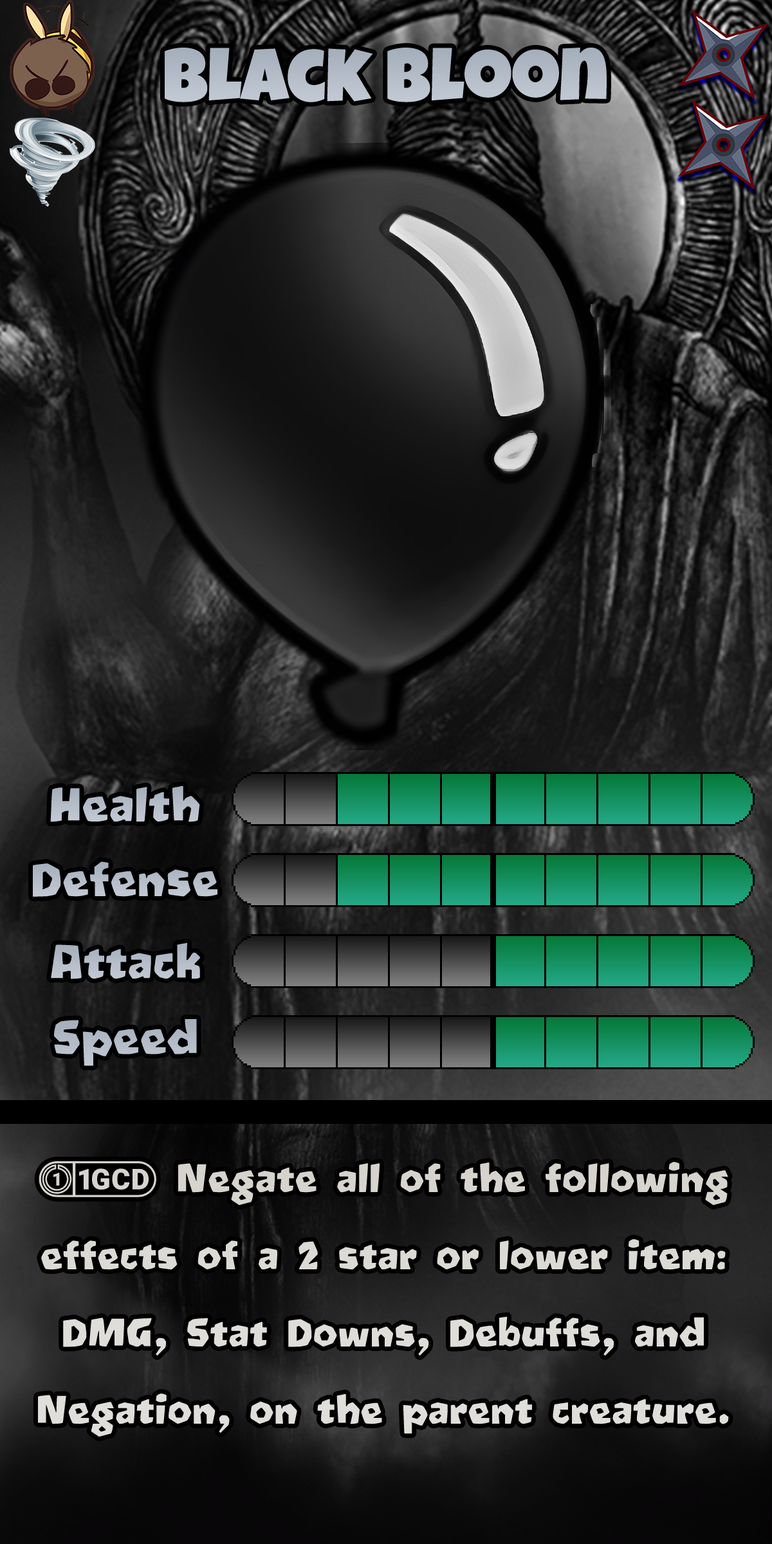
<style>
.page{position:relative;width:772px;height:1544px}
.page>*{position:absolute;margin:0}
.t1{font:128.7px "LuckiestGuy-Regular";color:#b3bcc8}
.t2{font:77.2px "Oetztype";color:#b5beca}
.t3{font:77.2px "Oetztype";color:#b7bfca}
.t4{font:77.2px "Oetztype";color:#b5bec9}
.t5{font:77.2px "Oetztype";color:#b2bbc7}
.t6{font:64.3px "Oetztype";color:#deddd8}
.t7{font:64.3px "stoogedings-Regular";color:#deddd8}
</style>
<div class="page">
<p class="t1" style="left:165px;top:48px;width:442px;height:54px">Black Bloon</p>
<p class="t2" style="left:50px;top:786px;width:150px;height:36px">Health</p>
<p class="t3" style="left:33px;top:862px;width:184px;height:35px">Defense</p>
<p class="t4" style="left:51px;top:943px;width:149px;height:36px">Attack</p>
<p class="t5" style="left:54px;top:1019px;width:143px;height:47px">Speed</p>
<p class="t6" style="left:38px;top:1161px;width:691px;height:276px;text-align:center"><span class="t7">(1GCD)</span> Negate all of the following effects of a 2 star or lower item: DMG, Stat Downs, Debuffs, and Negation, on the parent creature.</p>
</div>
